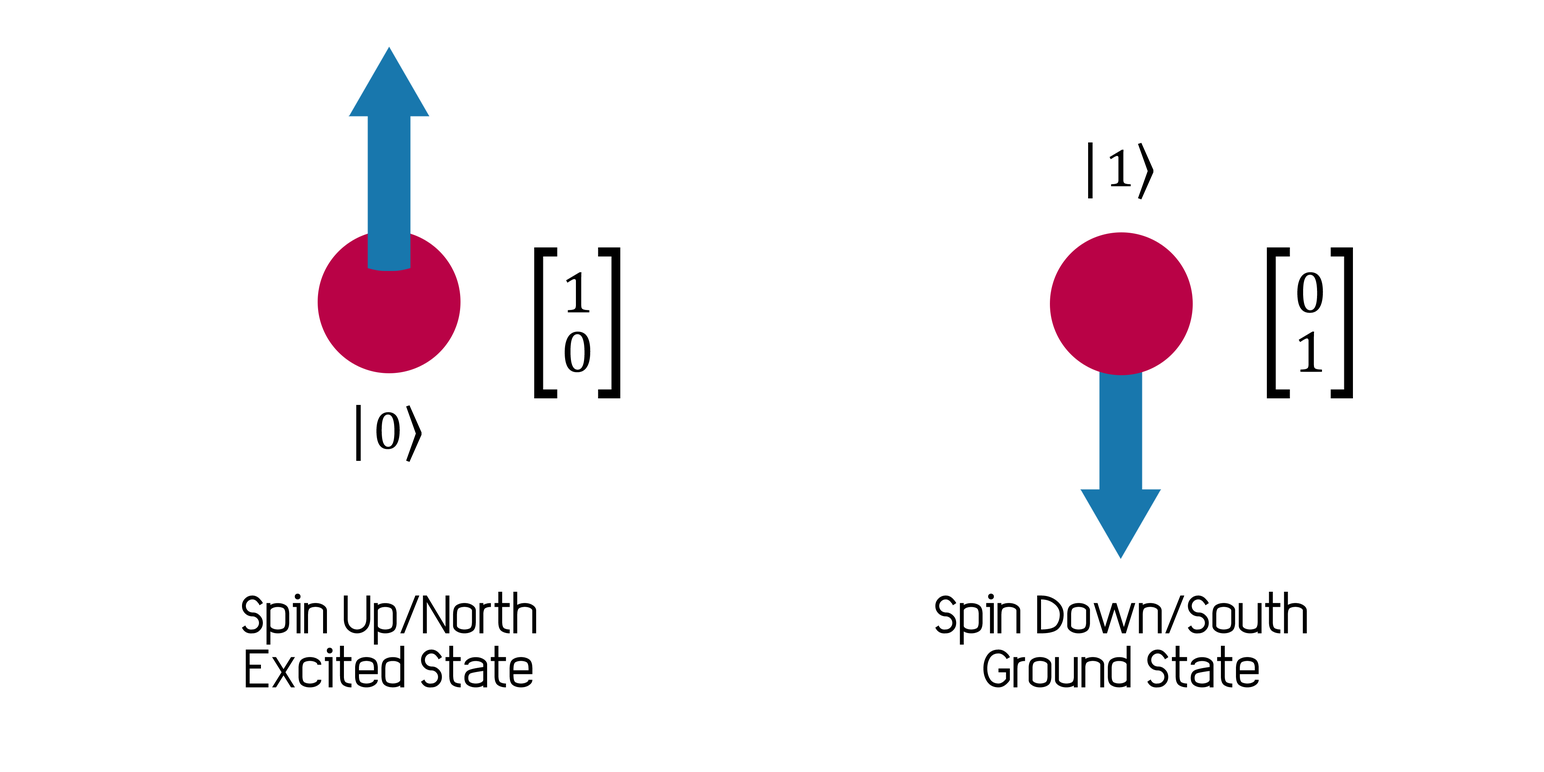
<style>
.page{position:relative;width:1544px;height:772px;background:#ffffff}
.page>*{position:absolute;margin:0}
.t1{font:61.8px "SitkaSmall-Italic";color:#000000}
.t2{font:54.1px "Cambria";color:#000000}
.t3{font:61.8px "Cambria";color:#000000}
.t4{font:59.4px/59.4px "Cambria";color:#000000}
.t5{font:38.6px/54.1px "EleganTech";color:#000000}
</style>
<div class="page">
<p class="t1" style="left:1088px;top:142px;width:66px;height:58px">|<span class="t2">1</span><span class="t3">⟩</span></p>
<p class="t4" style="left:565px;top:272px;width:26px;height:101px;text-align:center">1<br>0</p>
<p class="t4" style="left:1298px;top:272px;width:25px;height:100px;text-align:center">0<br>1</p>
<p class="t1" style="left:356px;top:405px;width:66px;height:57px">|<span class="t2">0</span><span class="t3">⟩</span></p>
<p class="t5" style="left:242px;top:592px;width:294px;height:96px;text-align:center">Spin Up/North<br>Excited State</p>
<p class="t5" style="left:935px;top:592px;width:372px;height:96px;text-align:center">Spin Down/South<br>Ground State</p>
</div>
